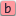
<style>
.page{position:relative;width:16px;height:16px;background:#ff989e}
.page>*{position:absolute;margin:0}
.t1{font:12px "Monaco";letter-spacing:0.02em;color:#34273a}
</style>
<div class="page">
<p class="t1" style="left:5px;top:3px;width:6px;height:10px">b</p>
</div>
